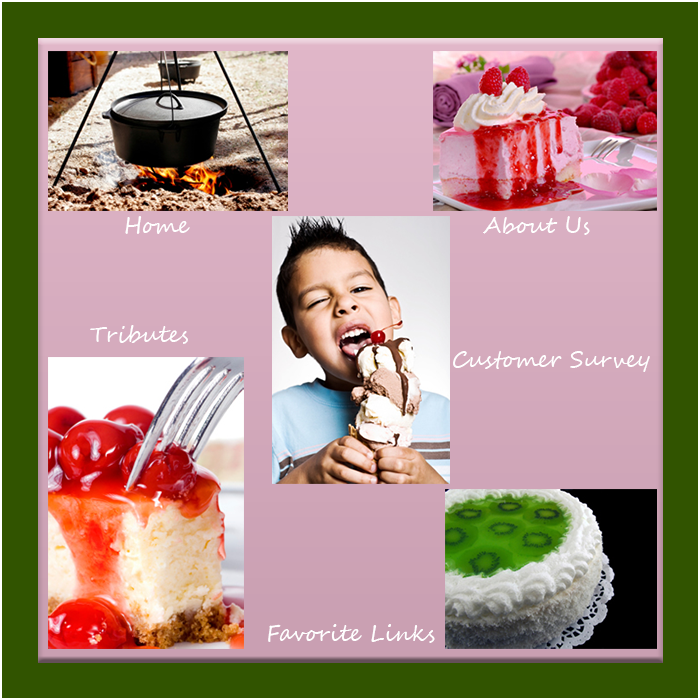
<style>
.page{position:relative;width:700px;height:700px}
.page>*{position:absolute;margin:0}
.t1{font:22px "SegoeScript";color:#ffffff}
</style>
<div class="page">
<p class="t1" style="left:125px;top:216px;width:65px;height:18px">Home</p>
<p class="t1" style="left:483px;top:216px;width:107px;height:19px">About Us</p>
<p class="t1" style="left:90px;top:325px;width:98px;height:19px">Tributes</p>
<p class="t1" style="left:453px;top:351px;width:197px;height:21px">Customer Survey</p>
<p class="t1" style="left:268px;top:624px;width:167px;height:19px">Favorite Links</p>
</div>
